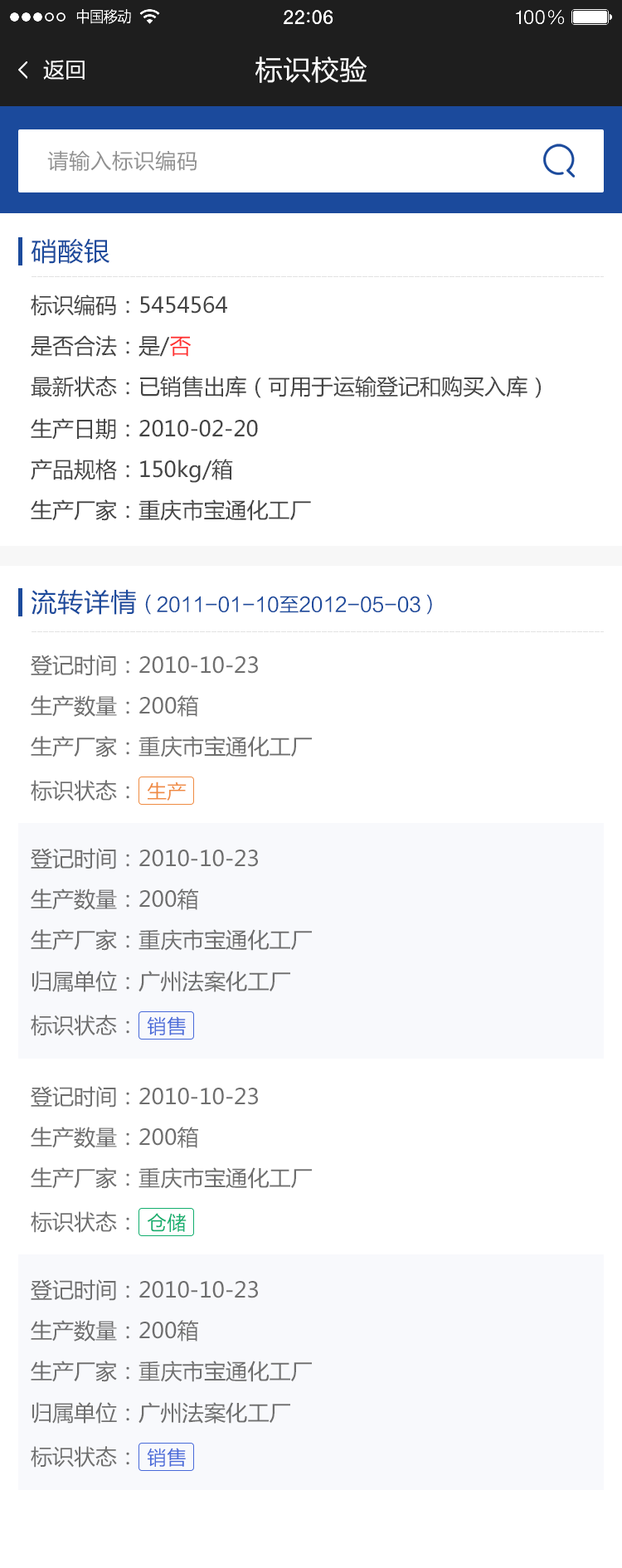
<style>
.page{position:relative;width:622px;height:1568px;background:#ffffff}
.page>*{position:absolute;margin:0}
.t1{font:21.6px "FZLTHJW--GB1-0";color:#ffffff}
.t2{font:28.2px "FZLTHJW--GB1-0";color:#ffffff}
.t3{font:21.6px "FZLTHJW--GB1-0";color:#919191}
.t4{font:26.5px "FZLTHJW--GB1-0";color:#1b4a9c}
.t5{font:21.6px "MicrosoftYaHei";color:#444444}
.t6{font:21.6px "MicrosoftYaHei";color:#ff3333}
.t7{font:19.9px "FZLTHJW--GB1-0";color:#1b4a9c}
.t8{font:21.6px "MicrosoftYaHei";color:#6e6e6e}
.t9{font:19.9px "FZLTHJW--GB1-0";color:#ef8b42;text-transform:uppercase}
.t10{font:19.9px "FZLTHJW--GB1-0";color:#486ad9;text-transform:uppercase}
.t11{font:19.9px "FZLTHJW--GB1-0";color:#11ae6d;text-transform:uppercase}
</style>
<div class="page">
<p class="t1" style="left:43px;top:60px;width:42px;height:20px">返回</p>
<p class="t2" style="left:256px;top:56px;width:111px;height:27px">标识校验</p>
<p class="t3" style="left:47px;top:150px;width:150px;height:21px">请输入标识编码</p>
<p class="t4" style="left:31px;top:238px;width:79px;height:26px">硝酸银</p>
<p class="t5" style="left:31px;top:295px;width:196px;height:21px">标识编码：5454564</p>
<p class="t5" style="left:31px;top:335px;width:160px;height:22px">是否合法：是/<span class="t6">否</span></p>
<p class="t5" style="left:31px;top:376px;width:510px;height:22px">最新状态：已销售出库（可用于运输登记和购买入库）</p>
<p class="t5" style="left:31px;top:418px;width:227px;height:22px">生产日期：2010-02-20</p>
<p class="t5" style="left:31px;top:459px;width:202px;height:24px">产品规格：150kg/箱</p>
<p class="t5" style="left:31px;top:499px;width:280px;height:22px">生产厂家：重庆市宝通化工厂</p>
<p class="t7" style="left:31px;top:589px;width:401px;height:26px"><span class="t4">流转详情</span>（2011-01-10至2012-05-03）</p>
<p class="t8" style="left:31px;top:655px;width:227px;height:21px">登记时间：2010-10-23</p>
<p class="t8" style="left:31px;top:695px;width:167px;height:22px">生产数量：200箱</p>
<p class="t8" style="left:31px;top:736px;width:281px;height:21px">生产厂家：重庆市宝通化工厂</p>
<p class="t8" style="left:31px;top:780px;width:98px;height:21px">标识状态：</p>
<p class="t9" style="left:147px;top:782px;width:40px;height:19px">生产</p>
<p class="t8" style="left:31px;top:848px;width:227px;height:21px">登记时间：2010-10-23</p>
<p class="t8" style="left:31px;top:889px;width:167px;height:21px">生产数量：200箱</p>
<p class="t8" style="left:31px;top:929px;width:281px;height:22px">生产厂家：重庆市宝通化工厂</p>
<p class="t8" style="left:32px;top:971px;width:258px;height:21px">归属单位：广州法案化工厂</p>
<p class="t8" style="left:31px;top:1015px;width:98px;height:21px">标识状态：</p>
<p class="t10" style="left:147px;top:1016px;width:39px;height:19px">销售</p>
<p class="t8" style="left:31px;top:1086px;width:227px;height:22px">登记时间：2010-10-23</p>
<p class="t8" style="left:31px;top:1127px;width:167px;height:21px">生产数量：200箱</p>
<p class="t8" style="left:31px;top:1167px;width:281px;height:22px">生产厂家：重庆市宝通化工厂</p>
<p class="t8" style="left:31px;top:1211px;width:98px;height:22px">标识状态：</p>
<p class="t11" style="left:148px;top:1213px;width:39px;height:19px">仓储</p>
<p class="t8" style="left:31px;top:1279px;width:227px;height:22px">登记时间：2010-10-23</p>
<p class="t8" style="left:31px;top:1320px;width:167px;height:22px">生产数量：200箱</p>
<p class="t8" style="left:31px;top:1361px;width:281px;height:21px">生产厂家：重庆市宝通化工厂</p>
<p class="t8" style="left:32px;top:1402px;width:258px;height:22px">归属单位：广州法案化工厂</p>
<p class="t8" style="left:31px;top:1446px;width:98px;height:22px">标识状态：</p>
<p class="t10" style="left:147px;top:1448px;width:39px;height:19px">销售</p>
</div>
